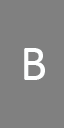
<style>
.page{position:relative;width:64px;height:128px;background:#808080}
.page>*{position:absolute;margin:0}
.t1{font:50px "Calibri";color:#feffff}
</style>
<div class="page">
<p class="t1" style="left:24px;top:48px;width:21px;height:32px">B</p>
</div>
